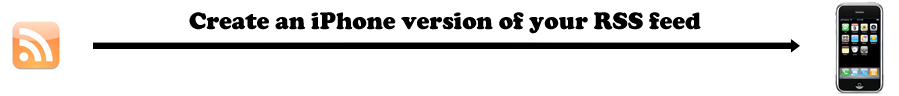
<style>
.page{position:relative;width:899px;height:96px;background:#ffffff}
.page>*{position:absolute;margin:0}
.t1{font:24.7px "CooperBlack";color:#000000}
</style>
<div class="page">
<p class="t1" style="left:189px;top:12px;width:512px;height:22px">Create an iPhone version of your RSS feed</p>
</div>
